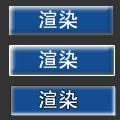
<style>
.page{position:relative;width:120px;height:120px;background:#333333}
.page>*{position:absolute;margin:0}
.t1{font:20px "SimHei";color:#ffffff}
</style>
<div class="page">
<p class="t1" style="left:39px;top:10px;width:39px;height:19px">渲染</p>
<p class="t1" style="left:39px;top:50px;width:39px;height:19px">渲染</p>
<p class="t1" style="left:39px;top:90px;width:39px;height:19px">渲染</p>
</div>
